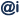
<style>
.page{position:relative;width:21px;height:16px;background:#ffffff}
.page>*{position:absolute;margin:0}
.t1{font:15px "ArialRoundedMTBold";color:#183053}
</style>
<div class="page">
<p class="t1" style="left:1px;top:1px;width:18px;height:15px">@i</p>
</div>
